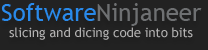
<style>
.page{position:relative;width:208px;height:50px;background:#222222}
.page>*{position:absolute;margin:0}
.t1{font:24px "TrebuchetMS";color:#298aeb}
.t2{font:24px "TrebuchetMS";color:#6e7072}
.t3{font:13px "TrebuchetMS";color:#b3b2b2}
</style>
<div class="page">
<p class="t1" style="left:1px;top:3px;width:95px;height:18px">Software</p>
<p class="t2" style="left:97px;top:3px;width:105px;height:23px">Ninjaneer</p>
<p class="t3" style="left:9px;top:27px;width:184px;height:13px">slicing and dicing code into bits</p>
</div>
